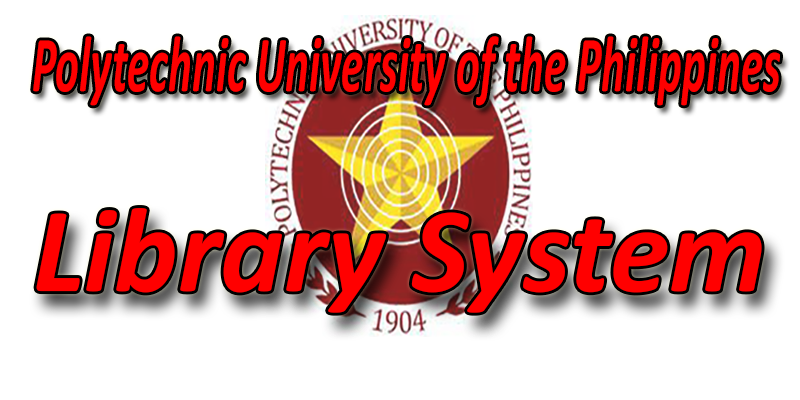
<style>
.page{position:relative;width:800px;height:400px;background:#ffffff}
.page>*{position:absolute;margin:0}
.t1{font:80.1px "Calibri-BoldItalic";color:#ff0000;scale:0.57 1}
.t2{font:121.7px "Calibri-BoldItalic";color:#ff0000}
</style>
<div class="page">
<p class="t1" style="left:33px;top:36px;width:747px;height:70px">Polytechnic University of the Philippines</p>
<p class="t2" style="left:36px;top:208px;width:726px;height:105px">Library System</p>
</div>
